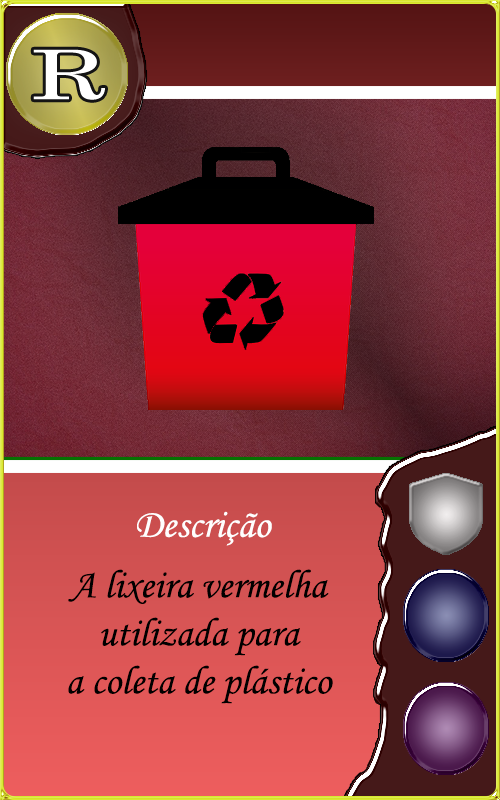
<style>
.page{position:relative;width:500px;height:800px}
.page>*{position:absolute;margin:0}
.t1{font:40px "MonotypeCorsiva";color:#fffefe}
.t2{font:40px "MonotypeCorsiva";color:#000000}
</style>
<div class="page">
<p class="t1" style="left:137px;top:511px;width:135px;height:35px">Descrição</p>
<p class="t2" style="left:68px;top:569px;width:265px;height:135px;text-align:center">A lixeira vermelha<br>utilizada para<br>a coleta de plástico</p>
</div>
